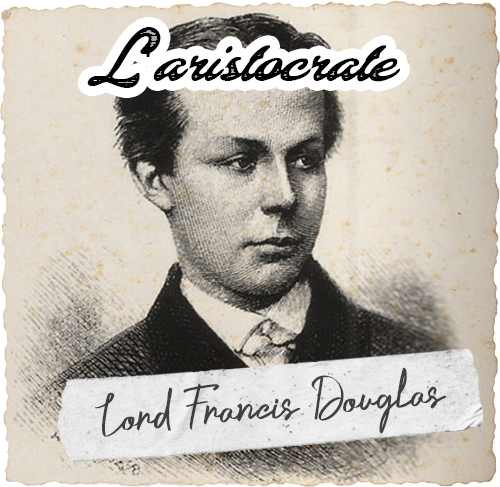
<style>
.page{position:relative;width:500px;height:487px}
.page>*{position:absolute;margin:0}
.t1{font:54.2px "ColinasPersonalUse-Regular";color:#000000}
.t2{font:54.2px "MyriadPro-Regular";color:#000000}
.t3{font:54.2px "CrustaceansSignatureDEMO-Reg";color:#404040}
</style>
<div class="page">
<p class="t1" style="left:87px;top:27px;width:314px;height:61px">L<span class="t2">'</span>aristocrate</p>
<p class="t3" style="left:94px;top:367px;width:353px;height:70px;rotate:-5deg">Lord Francis Douglas</p>
</div>
